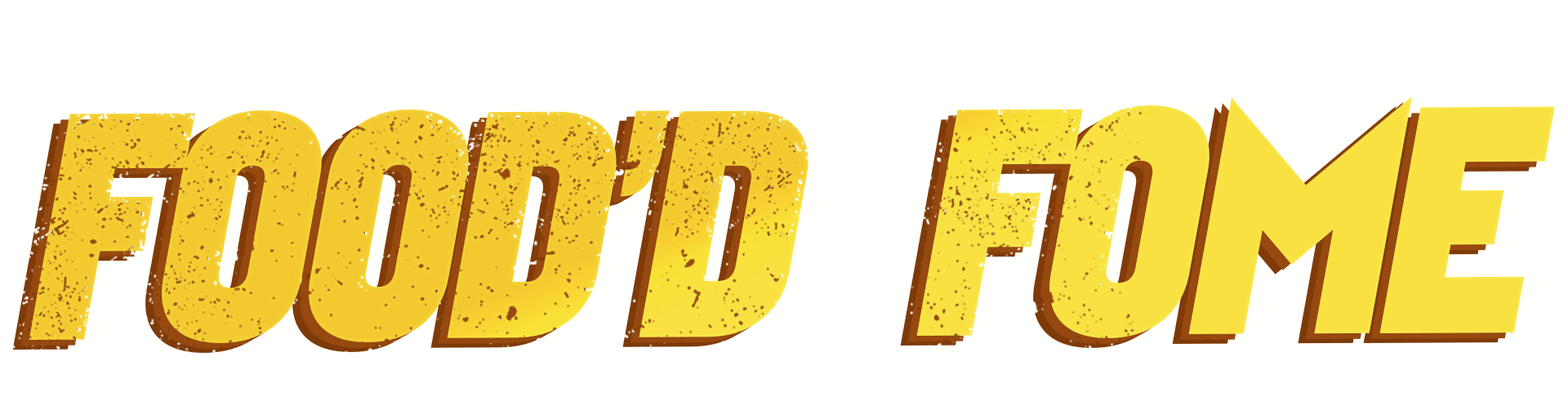
<style>
.page{position:relative;width:1568px;height:397px;background:#ffffff}
.page>*{position:absolute;margin:0}
.t1{font:301.5px "Faktos";letter-spacing:-0.04em;color:#f2ca30;text-transform:uppercase;scale:0.93 1}
</style>
<div class="page">
<p class="t1" style="left:29px;top:96px;width:1526px;height:247px">FOOD’D FoME</p>
</div>
